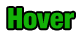
<style>
.page{position:relative;width:80px;height:40px;background:#ffffff}
.page>*{position:absolute;margin:0}
.t1{font:28px "Harvest";color:#13b207}
</style>
<div class="page">
<p class="t1" style="left:8px;top:8px;width:66px;height:21px">Hover</p>
</div>
